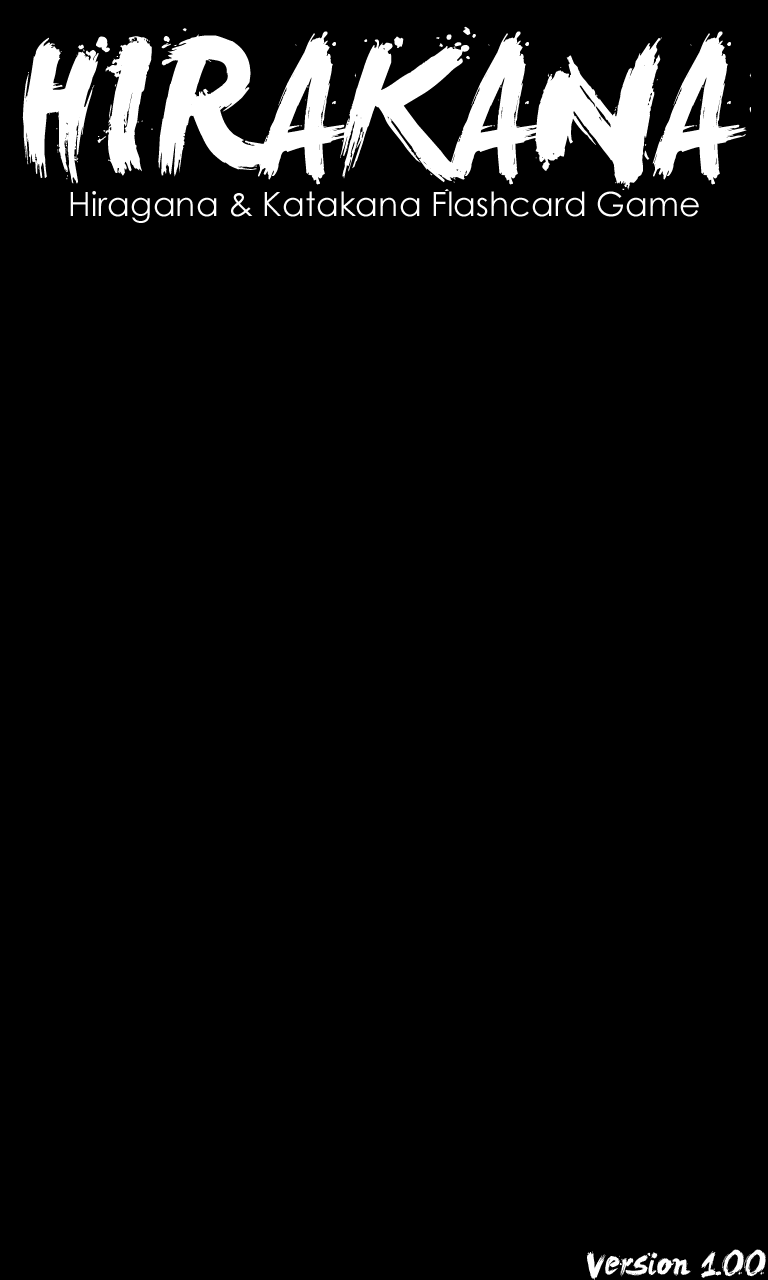
<style>
.page{position:relative;width:768px;height:1280px;background:#000000}
.page>*{position:absolute;margin:0}
.t1{font:175px "LeviReBrushed";color:#ffffff}
.t2{font:33.3px "CenturyGothic";color:#ffffff}
.t3{font:33.3px "LeviReBrushed";color:#ffffff}
</style>
<div class="page">
<p class="t1" style="left:22px;top:26px;width:730px;height:165px">HIRAKANA</p>
<p class="t2" style="left:70px;top:191px;width:629px;height:32px">Hiragana &amp; Katakana Flashcard Game</p>
<p class="t3" style="left:586px;top:1249px;width:180px;height:31px">Version 1.00</p>
</div>
